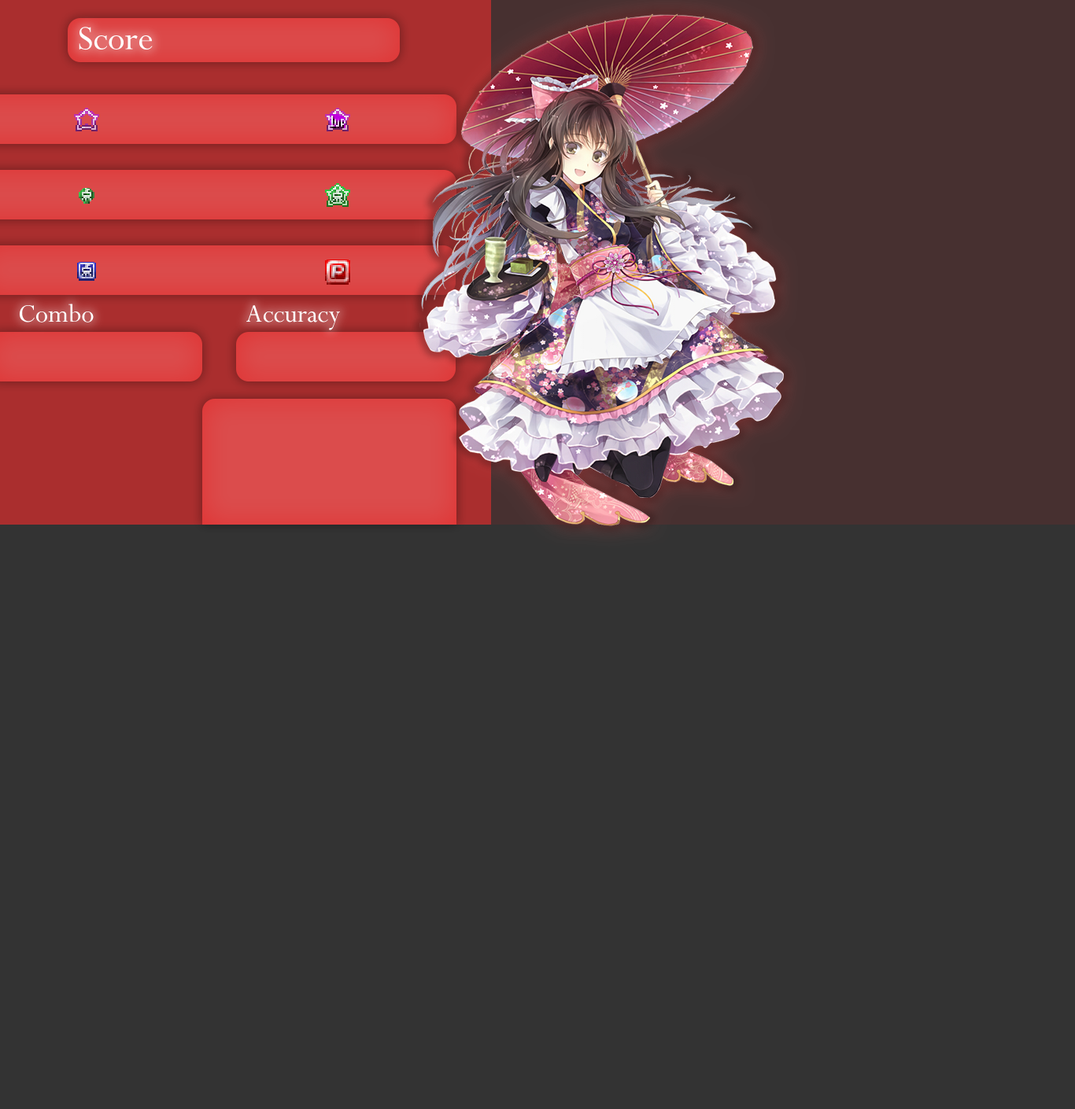
<style>
.page{position:relative;width:1075px;height:1109px;background:#333333}
.page>*{position:absolute;margin:0}
.t1{font:37.8px "Perpetua";color:#ffffff}
.t2{font:28.3px "Perpetua";color:#ffffff}
</style>
<div class="page">
<p class="t1" style="left:79px;top:27px;width:74px;height:23px">Score</p>
<p class="t2" style="left:20px;top:304px;width:74px;height:19px">Combo</p>
<p class="t2" style="left:246px;top:305px;width:94px;height:25px">Accuracy</p>
</div>
